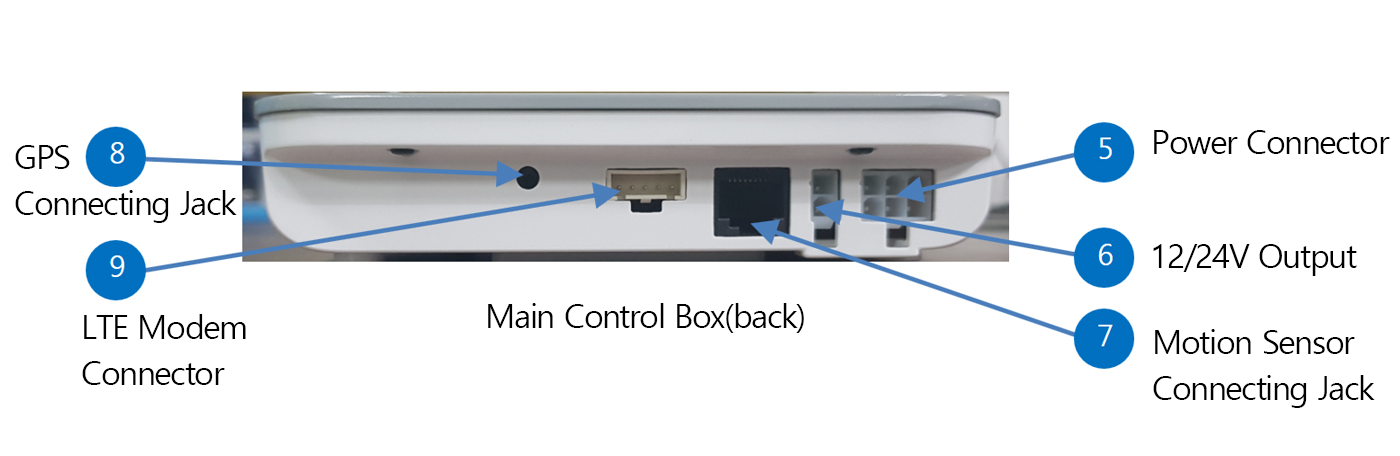
<style>
.page{position:relative;width:1400px;height:456px;background:#ffffff}
.page>*{position:absolute;margin:0}
.t1{font:33.3px "MalgunGothic";letter-spacing:-0.05em;color:#000000}
.t2{font:33.3px/45.8px "MalgunGothic";letter-spacing:-0.05em;color:#000000}
</style>
<div class="page">
<p class="t1" style="left:1154px;top:130px;width:236px;height:24px">Power Connector</p>
<p class="t2" style="left:15px;top:145px;width:222px;height:78px">GPS <br>Connecting Jack</p>
<p class="t1" style="left:1153px;top:244px;width:204px;height:32px">12/24V Output</p>
<p class="t1" style="left:488px;top:303px;width:316px;height:30px">Main Control Box(back)</p>
<p class="t2" style="left:82px;top:314px;width:164px;height:71px">LTE Modem<br>Connector</p>
<p class="t2" style="left:1153px;top:329px;width:222px;height:79px">Motion Sensor<br>Connecting Jack</p>
</div>
